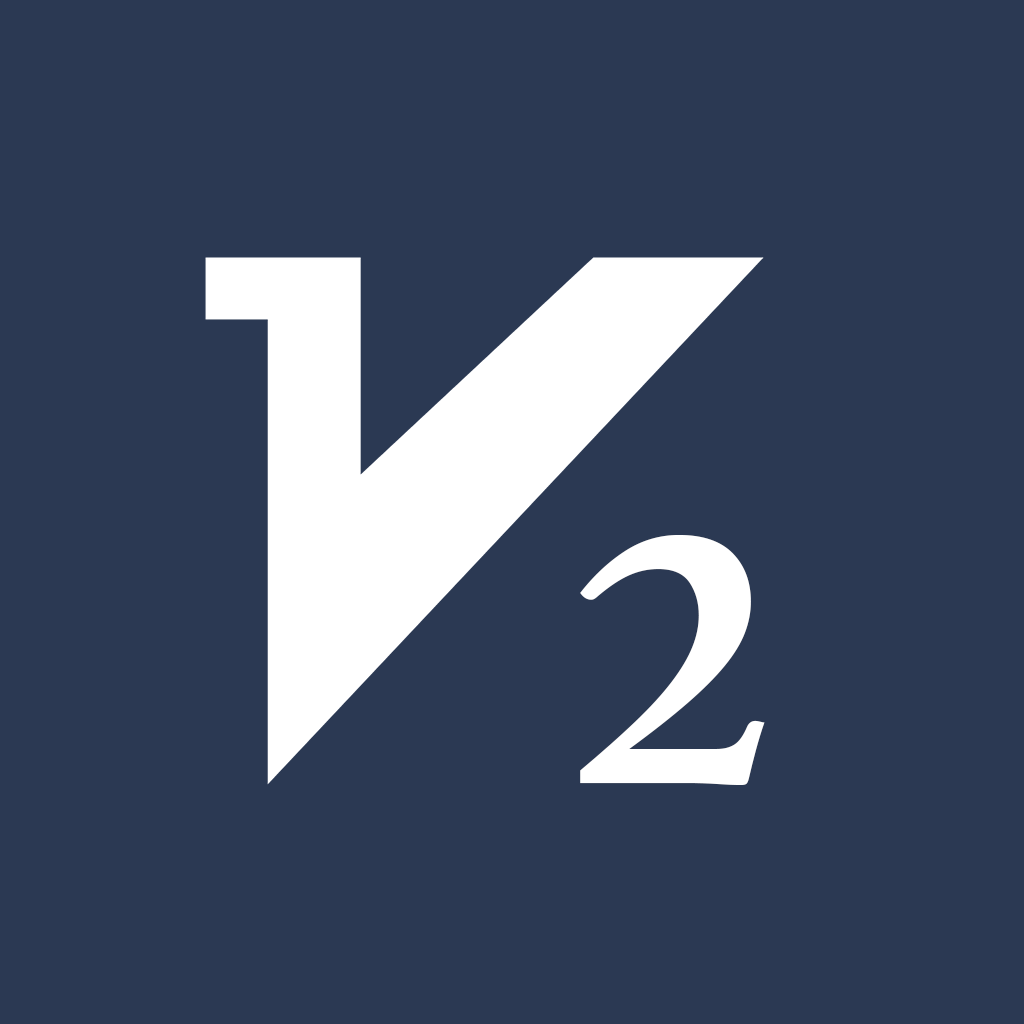
<style>
.page{position:relative;width:1024px;height:1024px;background:#2b3953}
.page>*{position:absolute;margin:0}
.t1{font:520px "Athelas-Regular";color:#ffffff}
</style>
<div class="page">
<p class="t1" style="left:580px;top:535px;width:185px;height:250px">2</p>
</div>
